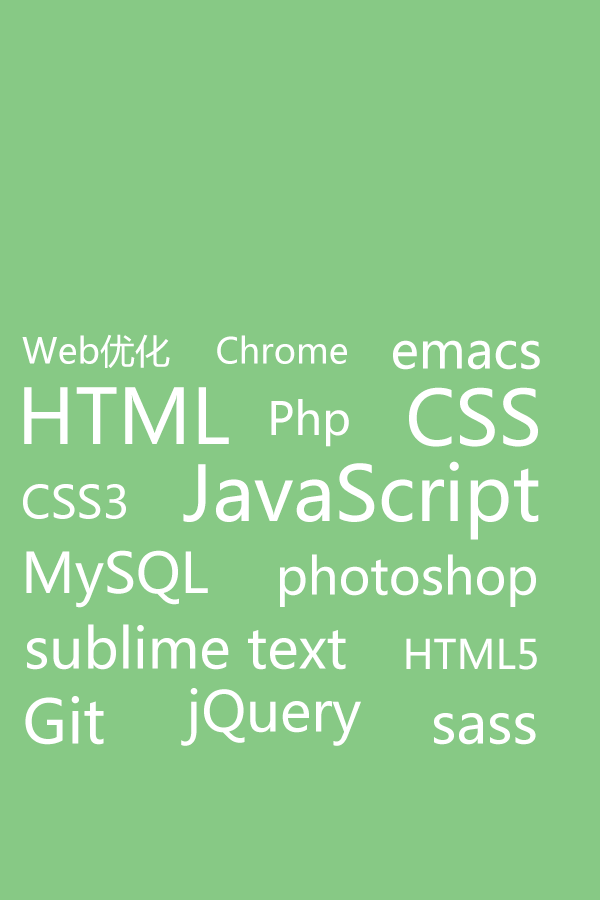
<style>
.page{position:relative;width:600px;height:900px;background:#87c985}
.page>*{position:absolute;margin:0}
.t1{font:35px "MicrosoftYaHei";color:#ffffff}
.t2{font:50px "MicrosoftYaHei";color:#ffffff}
.t3{font:75px "MicrosoftYaHei";color:#ffffff}
.t4{font:45px "MicrosoftYaHei";color:#ffffff}
.t5{font:55px "MicrosoftYaHei";color:#ffffff}
.t6{font:40px "MicrosoftYaHei";color:#ffffff}
.t7{font:60px "MicrosoftYaHei";color:#ffffff}
</style>
<div class="page">
<p class="t1" style="left:22px;top:334px;width:148px;height:34px">Web优化</p>
<p class="t1" style="left:217px;top:335px;width:130px;height:29px">Chrome</p>
<p class="t2" style="left:393px;top:340px;width:147px;height:30px">emacs</p>
<p class="t3" style="left:24px;top:387px;width:205px;height:57px">HTML</p>
<p class="t3" style="left:409px;top:387px;width:129px;height:60px">CSS</p>
<p class="t4" style="left:271px;top:399px;width:78px;height:48px">Php</p>
<p class="t3" style="left:183px;top:461px;width:356px;height:79px">JavaScript</p>
<p class="t4" style="left:23px;top:484px;width:103px;height:35px">CSS3</p>
<p class="t5" style="left:26px;top:550px;width:182px;height:58px">MySQL</p>
<p class="t2" style="left:280px;top:554px;width:256px;height:53px">photoshop</p>
<p class="t5" style="left:27px;top:624px;width:319px;height:46px">sublime text</p>
<p class="t6" style="left:406px;top:638px;width:131px;height:32px">HTML5</p>
<p class="t5" style="left:181px;top:688px;width:180px;height:58px">jQuery</p>
<p class="t7" style="left:25px;top:696px;width:79px;height:49px">Git</p>
<p class="t5" style="left:434px;top:713px;width:102px;height:32px">sass</p>
</div>
